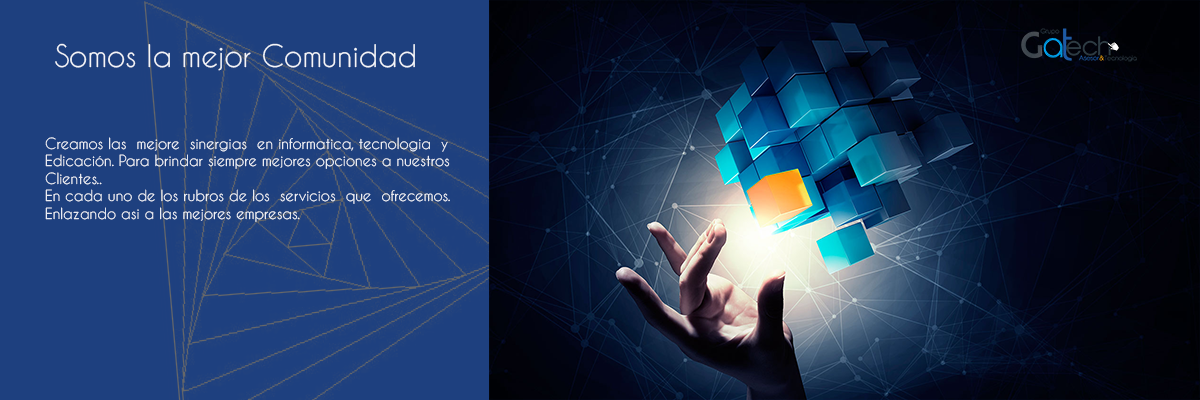
<style>
.page{position:relative;width:1200px;height:400px;background:#1e407f}
.page>*{position:absolute;margin:0}
.t1{font:29.2px "CaviarDreams";color:#f4f6fa}
.t2{font:14.6px "CaviarDreams";color:#f4f6fa}
</style>
<div class="page">
<p class="t1" style="left:55px;top:43px;width:360px;height:28px">Somos la mejor Comunidad</p>
<p class="t2" style="left:45px;top:137px;width:405px;height:85px">Creamos las  mejore  sinergias  en informatica, tecnologia  y<br>Edicación. Para brindar siempre mejores opciones a nuestros<br>Clientes.. <br>En cada uno de los rubros de los  servicios  que  ofrecemos.<br>Enlazando asi a las mejores empresas.</p>
</div>
